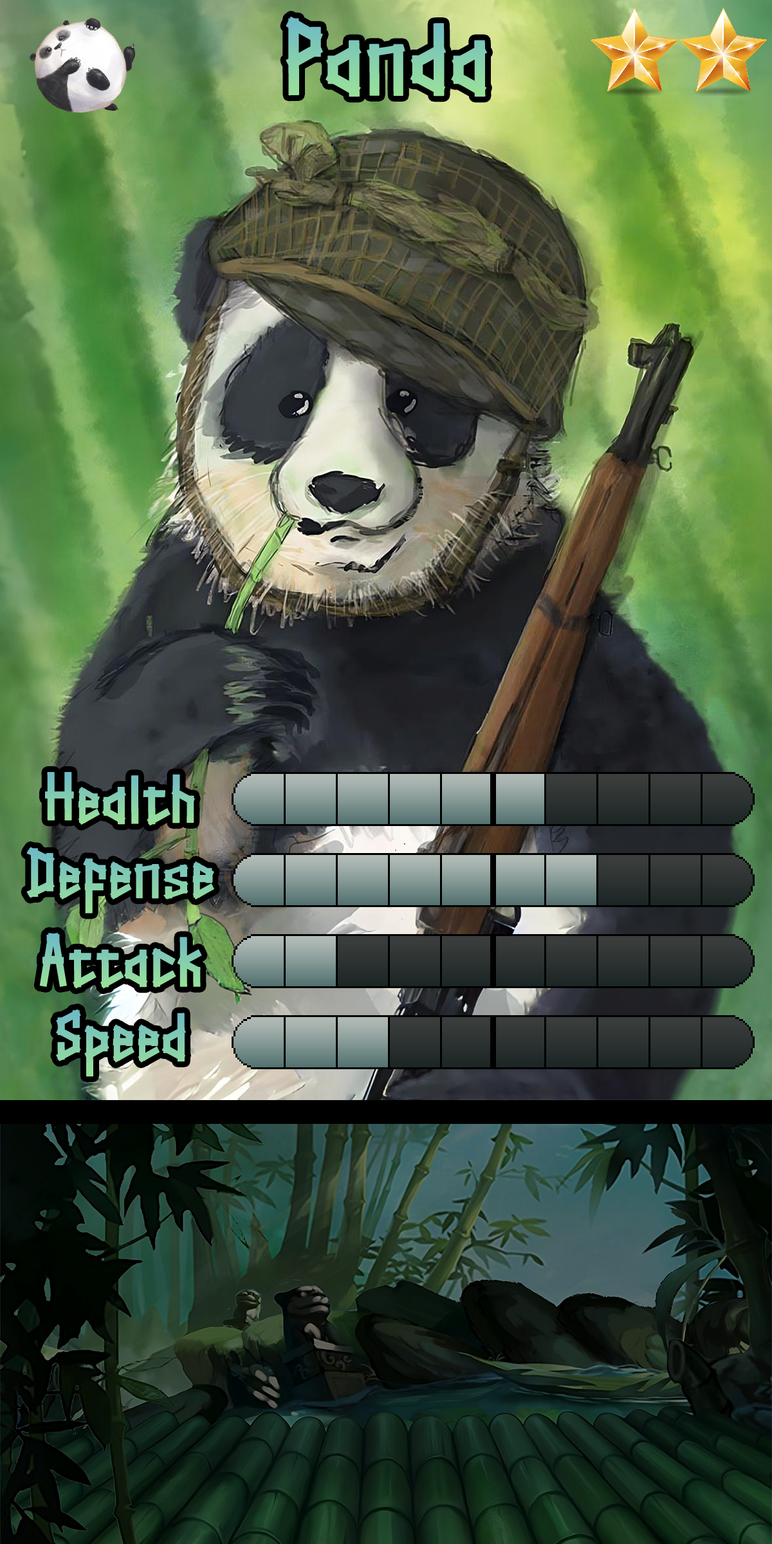
<style>
.page{position:relative;width:772px;height:1544px}
.page>*{position:absolute;margin:0}
.t1{font:193.7px "Straightwell";color:#88d1ac}
.t2{font:128.7px "Straightwell";color:#87d0ac}
.t3{font:128.7px "Straightwell";color:#83cdb0}
.t4{font:128.7px "Straightwell";color:#88d1ab}
</style>
<div class="page">
<p class="t1" style="left:286px;top:16px;width:202px;height:81px">Panda</p>
<p class="t2" style="left:45px;top:772px;width:150px;height:54px">Health</p>
<p class="t3" style="left:26px;top:847px;width:188px;height:67px">Defense</p>
<p class="t4" style="left:39px;top:933px;width:163px;height:56px">Attack</p>
<p class="t3" style="left:56px;top:1009px;width:130px;height:68px">Speed</p>
</div>
